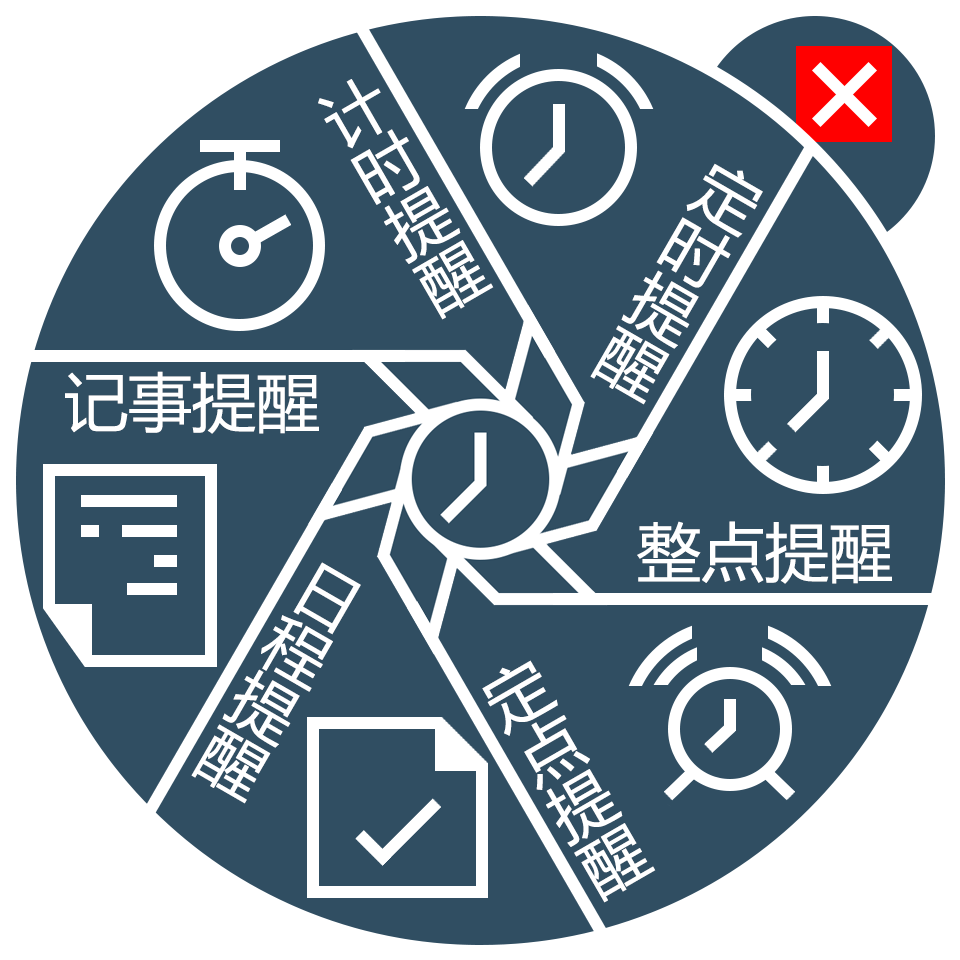
<style>
.page{position:relative;width:960px;height:960px;background:#304e62}
.page>*{position:absolute;margin:0}
.t1{font:64px "MicrosoftYaHeiUI";color:#ffffff}
</style>
<div class="page">
<p class="t1" style="left:318px;top:79px;width:176px;height:241px;rotate:-30deg">计时提醒</p>
<p class="t1" style="left:590px;top:163px;width:173px;height:242px;rotate:30deg">定时提醒</p>
<p class="t1" style="left:65px;top:371px;width:254px;height:63px">记事提醒</p>
<p class="t1" style="left:637px;top:521px;width:255px;height:63px">整点提醒</p>
<p class="t1" style="left:191px;top:562px;width:170px;height:242px;rotate:30deg">日程提醒</p>
<p class="t1" style="left:482px;top:660px;width:174px;height:243px;rotate:-30deg">定点提醒</p>
</div>
